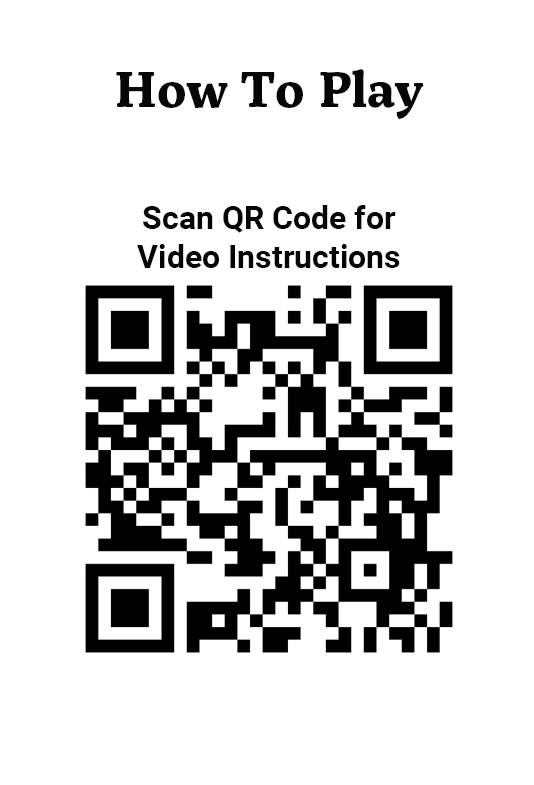
<style>
.page{position:relative;width:534px;height:785px;background:#ffffff}
.page>*{position:absolute;margin:0}
.t1{font:50px "ServusSlab-Bold";color:#060606}
.t2{font:32px "Roboto-Bold";color:#060606}
</style>
<div class="page">
<p class="t1" style="left:116px;top:69px;width:308px;height:50px">How To Play</p>
<p class="t2" style="left:137px;top:205px;width:263px;height:63px;text-align:center">Scan QR Code for <br>Video Instructions</p>
</div>
